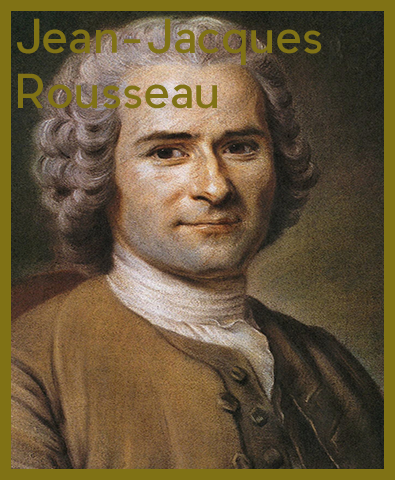
<style>
.page{position:relative;width:395px;height:480px}
.page>*{position:absolute;margin:0}
.t1{font:45.8px "PierSans";color:#807215}
</style>
<div class="page">
<p class="t1" style="left:17px;top:18px;width:305px;height:91px">Jean-Jacques<br>Rousseau</p>
</div>
